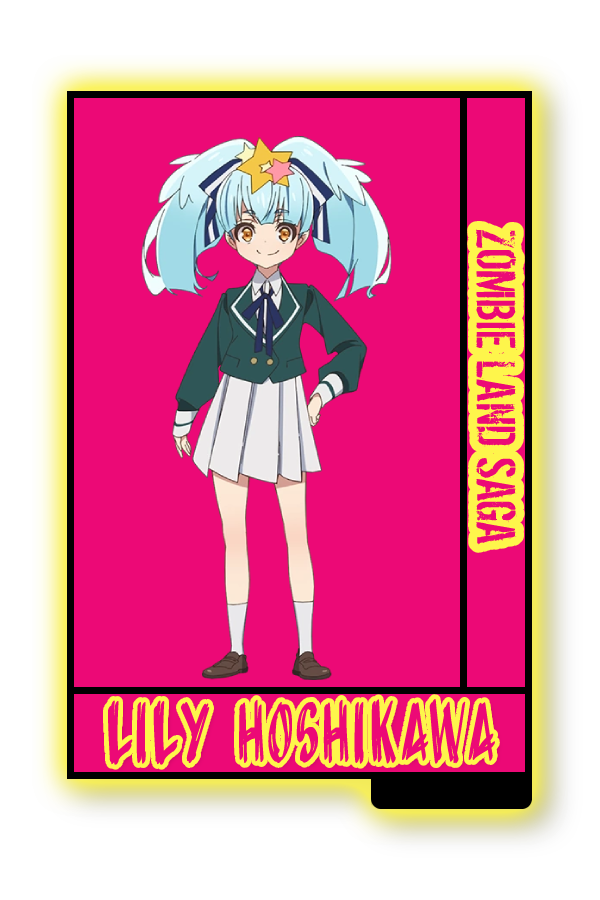
<style>
.page{position:relative;width:600px;height:900px;background:#ec0976}
.page>*{position:absolute;margin:0}
.t1{font:60.3px "DirtyEgo";color:#ec0976;scale:1.05 1}
.t2{font:72.2px "AnuDaw";color:#ec0976;scale:0.47 1}
</style>
<div class="page">
<p class="t1" style="left:476px;top:229px;width:41px;height:316px;rotate:90deg">ZOMBIE LAND SAGA</p>
<p class="t2" style="left:108px;top:699px;width:387px;height:66px">Lily Hoshikawa</p>
</div>
